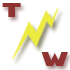
<style>
.page{position:relative;width:70px;height:70px;background:#ffffff}
.page>*{position:absolute;margin:0}
.t1{font:24px "RedFive";color:#8f3232}
</style>
<div class="page">
<p class="t1" style="left:2px;top:3px;width:19px;height:14px">T</p>
<p class="t1" style="left:41px;top:52px;width:27px;height:14px">w</p>
</div>
